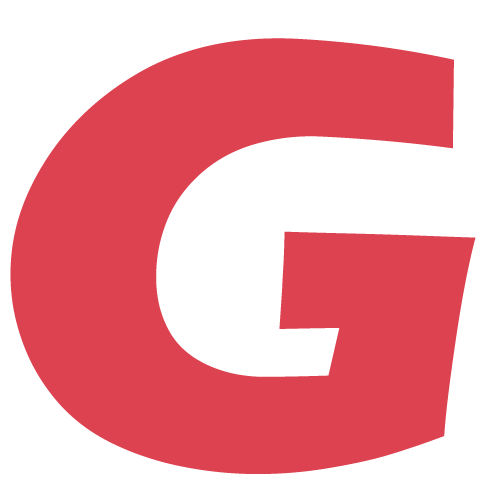
<style>
.page{position:relative;width:500px;height:500px;background:#ffffff}
.page>*{position:absolute;margin:0}
.t1{font:561px "ErasITC-Bold";color:#dd4250;scale:1.15 1}
</style>
<div class="page">
<p class="t1" style="left:10px;top:38px;width:466px;height:436px">G</p>
</div>
